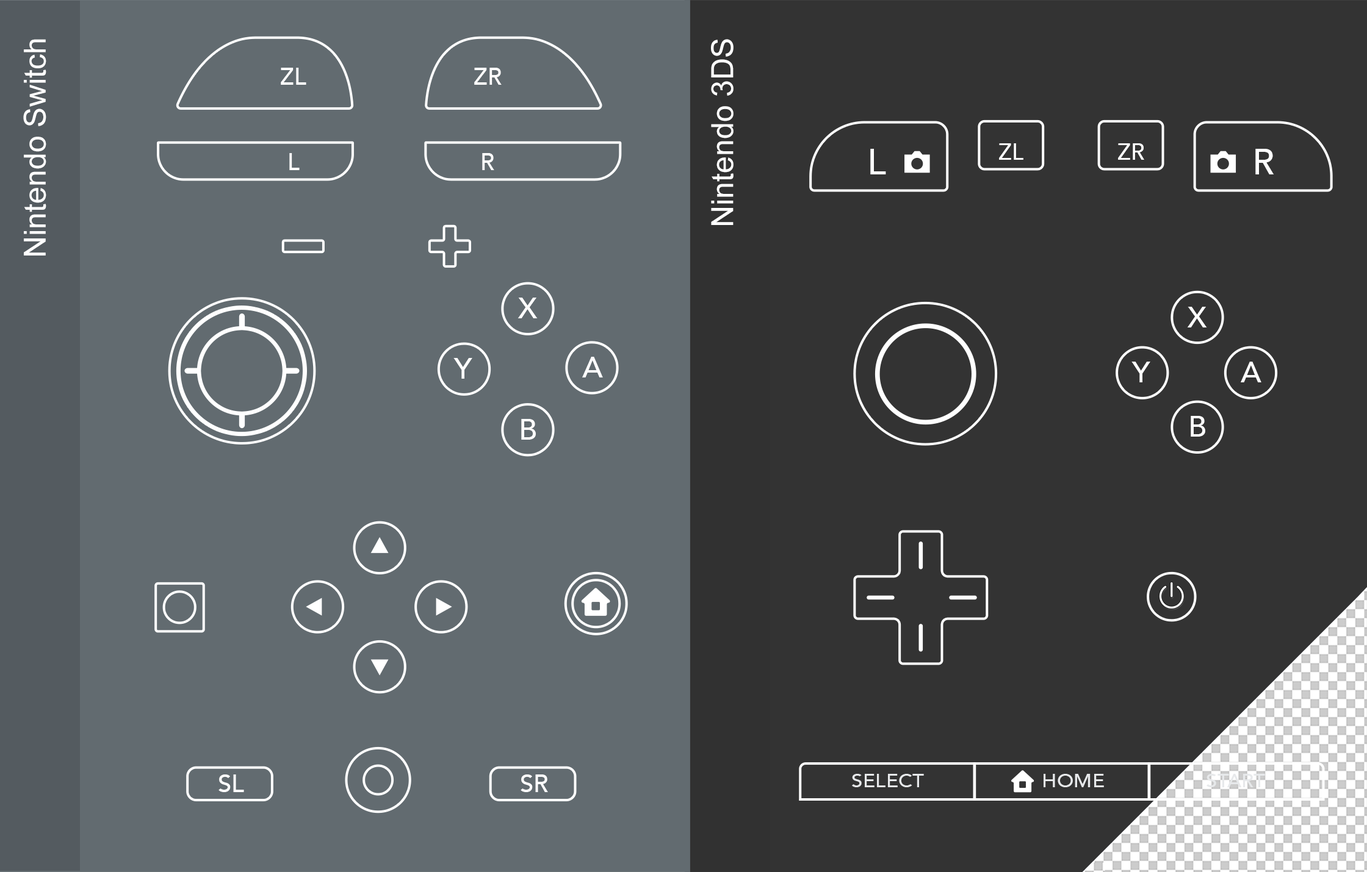
<style>
.page{position:relative;width:1367px;height:872px;background:#626b70}
.page>*{position:absolute;margin:0}
.t1{font:30.5px "ArialMT";color:#ffffff}
.t2{font:23.4px "Avenir-Medium";color:#ffffff}
.t3{font:36.2px "Avenir-Medium";color:#ffffff}
.t4{font:22.6px "Avenir-Medium";color:#ffffff}
.t5{font:29.5px "Avenir-Medium";color:#ffffff}
.t6{font:24.2px "Avenir-Medium";color:#ffffff}
.t7{font:18.4px "Avenir-Medium";color:#e7e9eb;scale:1.11 1}
</style>
<div class="page">
<p class="t1" style="left:23px;top:39px;width:23px;height:217px;rotate:-90deg">Nintendo Switch</p>
<p class="t1" style="left:711px;top:39px;width:22px;height:186px;rotate:-90deg">Nintendo 3DS</p>
<p class="t2" style="left:281px;top:68px;width:25px;height:17px">ZL</p>
<p class="t2" style="left:474px;top:68px;width:28px;height:17px">ZR</p>
<p class="t3" style="left:870px;top:149px;width:16px;height:25px">L</p>
<p class="t4" style="left:999px;top:143px;width:24px;height:17px">ZL</p>
<p class="t4" style="left:1118px;top:143px;width:26px;height:17px">ZR</p>
<p class="t3" style="left:1255px;top:149px;width:19px;height:25px">R</p>
<p class="t2" style="left:289px;top:153px;width:11px;height:17px">L</p>
<p class="t2" style="left:482px;top:153px;width:12px;height:17px">R</p>
<p class="t5" style="left:517px;top:298px;width:21px;height:20px">X</p>
<p class="t5" style="left:1187px;top:307px;width:20px;height:21px">X</p>
<p class="t5" style="left:453px;top:358px;width:19px;height:21px">Y</p>
<p class="t5" style="left:582px;top:357px;width:21px;height:21px">A</p>
<p class="t5" style="left:1131px;top:362px;width:19px;height:21px">Y</p>
<p class="t5" style="left:1240px;top:362px;width:21px;height:21px">A</p>
<p class="t5" style="left:521px;top:419px;width:15px;height:21px">B</p>
<p class="t5" style="left:1190px;top:416px;width:15px;height:21px">B</p>
<p class="t6" style="left:218px;top:775px;width:26px;height:18px">SL</p>
<p class="t6" style="left:520px;top:775px;width:28px;height:18px">SR</p>
<p class="t7" style="left:852px;top:774px;width:72px;height:14px">SELECT</p>
<p class="t7" style="left:1043px;top:774px;width:61px;height:14px">HOME</p>
</div>
